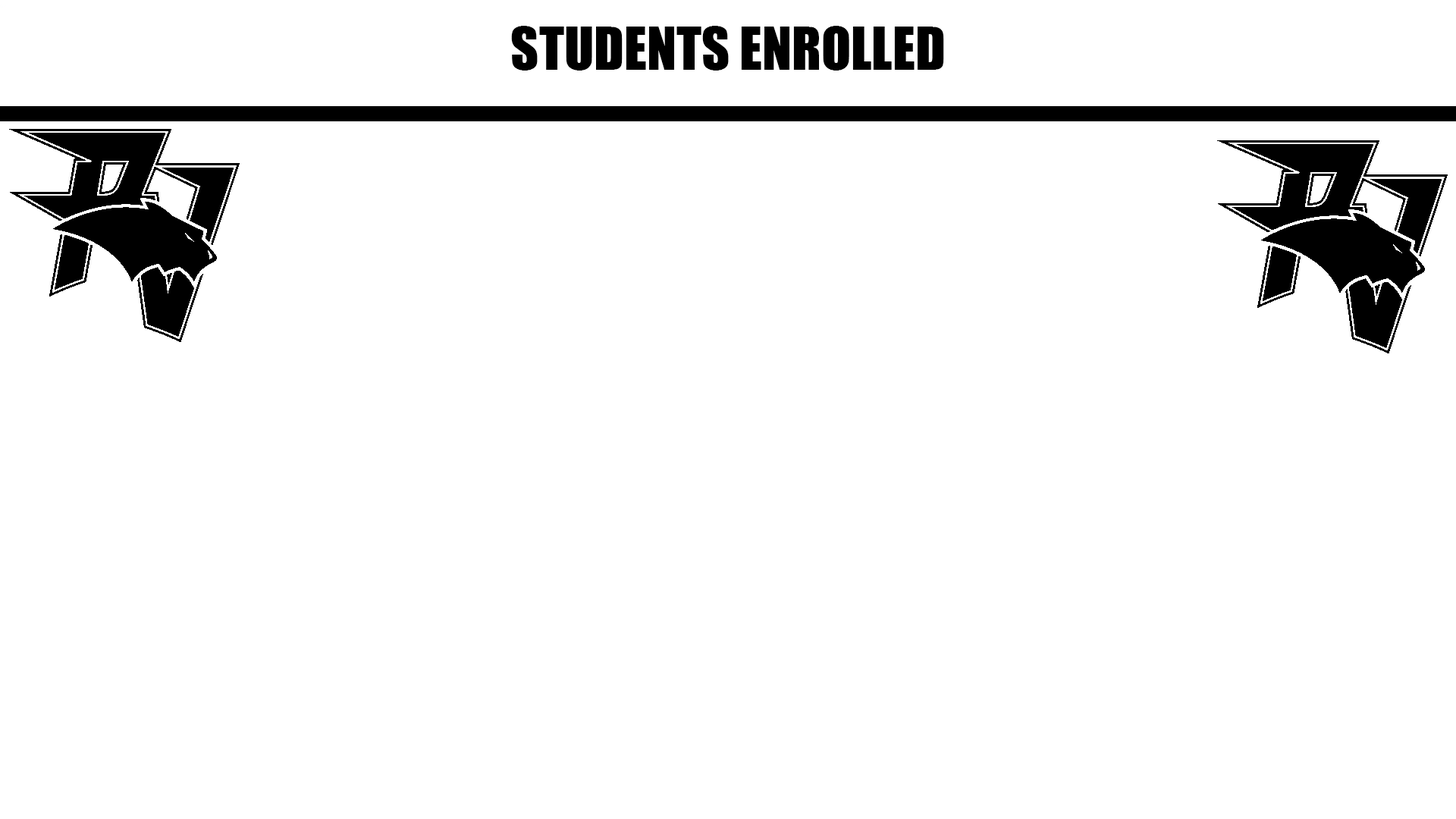
<style>
.page{position:relative;width:1456px;height:819px;background:#ffffff}
.page>*{position:absolute;margin:0}
.t1{font:54.6px "Impact";color:#000000}
</style>
<div class="page">
<p class="t1" style="left:511px;top:26px;width:433px;height:45px">STUDENTS ENROLLED</p>
</div>
